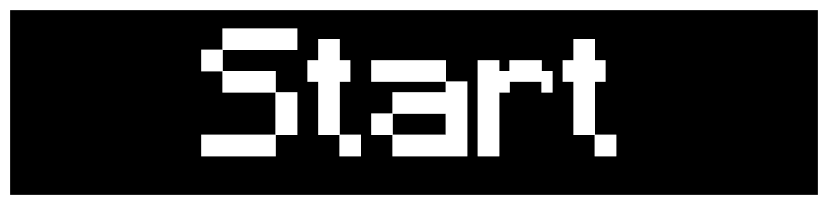
<style>
.page{position:relative;width:828px;height:205px;background:#000000}
.page>*{position:absolute;margin:0}
.t1{font:170.2px "Minecraft";color:#ffffff}
</style>
<div class="page">
<p class="t1" style="left:201px;top:28px;width:416px;height:129px">Start</p>
</div>
